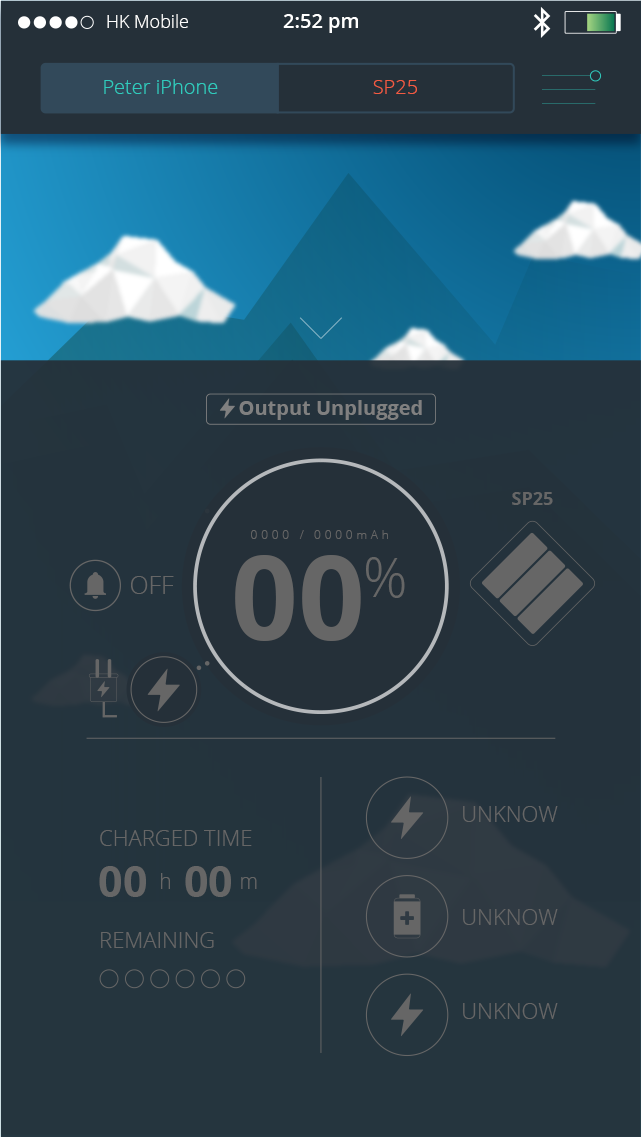
<style>
.page{position:relative;width:641px;height:1137px}
.page>*{position:absolute;margin:0}
.t1{font:18px "OpenSans-Light";color:#ffffff}
.t2{font:20px "OpenSans-Semibold";color:#ffffff}
.t3{font:20px "OpenSans-Light";color:#30cbbd}
.t4{font:20px "OpenSans-Light";color:#f25b42}
.t5{font:20px "OpenSans-Bold";color:#808080}
.t6{font:18px "OpenSans-Bold";color:#666666}
.t7{font:12.4px "OpenSans-Light";letter-spacing:0.28em;color:#666666}
.t8{font:117.2px "OpenSans-Bold";color:#666666}
.t9{font:55px "OpenSans-Light";color:#666666}
.t10{font:25px "OpenSans-Light";color:#666666}
.t11{font:22px "OpenSans-Light";color:#666666}
.t12{font:43px "OpenSans-Bold";color:#666666}
.t13{font:21px "OpenSans-Light";color:#666666}
</style>
<div class="page">
<p class="t1" style="left:107px;top:14px;width:81px;height:14px">HK Mobile</p>
<p class="t2" style="left:283px;top:14px;width:75px;height:19px">2:52 pm</p>
<p class="t3" style="left:104px;top:79px;width:114px;height:15px">Peter iPhone</p>
<p class="t4" style="left:373px;top:80px;width:44px;height:14px">SP25</p>
<p class="t5" style="left:239px;top:400px;width:183px;height:20px">Output Unplugged</p>
<p class="t6" style="left:512px;top:492px;width:41px;height:13px">SP25</p>
<p class="t7" style="left:251px;top:530px;width:137px;height:9px">0000 / 0000mAh</p>
<p class="t8" style="left:235px;top:555px;width:126px;height:86px">00</p>
<p class="t9" style="left:366px;top:557px;width:39px;height:41px">%</p>
<p class="t10" style="left:131px;top:576px;width:43px;height:18px">OFF</p>
<p class="t11" style="left:463px;top:806px;width:95px;height:16px">UNKNOW</p>
<p class="t11" style="left:100px;top:830px;width:152px;height:16px">CHARGED TIME</p>
<p class="t12" style="left:99px;top:866px;width:47px;height:31px">00</p>
<p class="t12" style="left:185px;top:866px;width:46px;height:31px">00</p>
<p class="t13" style="left:161px;top:873px;width:9px;height:16px">h</p>
<p class="t13" style="left:241px;top:877px;width:16px;height:12px">m</p>
<p class="t11" style="left:463px;top:909px;width:95px;height:16px">UNKNOW</p>
<p class="t11" style="left:101px;top:932px;width:113px;height:16px">REMAINING</p>
<p class="t11" style="left:463px;top:1003px;width:95px;height:16px">UNKNOW</p>
</div>
